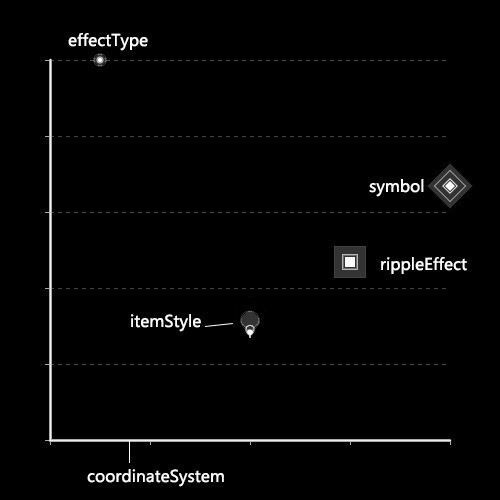
<style>
.page{position:relative;width:500px;height:500px;background:#000000}
.page>*{position:absolute;margin:0}
.t1{font:16px "MicrosoftYaHei";color:#fffefe}
</style>
<div class="page">
<p class="t1" style="left:68px;top:33px;width:80px;height:18px">effectType</p>
<p class="t1" style="left:369px;top:179px;width:55px;height:18px">symbol</p>
<p class="t1" style="left:381px;top:257px;width:86px;height:17px">rippleEffect</p>
<p class="t1" style="left:131px;top:314px;width:70px;height:18px">itemStyle</p>
<p class="t1" style="left:87px;top:469px;width:137px;height:18px">coordinateSystem</p>
</div>
